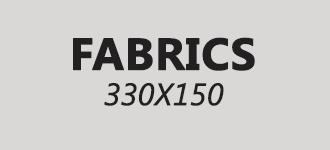
<style>
.page{position:relative;width:330px;height:150px;background:#dad7d7}
.page>*{position:absolute;margin:0}
.t1{font:44.5px "SegoeUI-Bold";color:#222020;text-transform:uppercase;font-weight:bold}
.t2{font:30.9px "SegoeUI-Italic";color:#222020;text-transform:uppercase;font-weight:bold;scale:0.97 1}
</style>
<div class="page">
<p class="t1" style="left:73px;top:37px;width:182px;height:34px">fABRICS</p>
<p class="t2" style="left:104px;top:82px;width:120px;height:24px">330x150</p>
</div>
